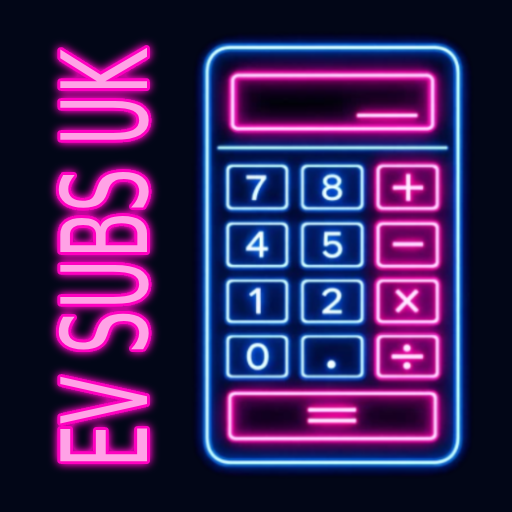
<style>
.page{position:relative;width:512px;height:512px;background:#020617}
.page>*{position:absolute;margin:0}
.t1{font:118.9px "DejaVuSans";color:#ffa2e6;scale:0.59 1}
</style>
<div class="page">
<p class="t1" style="left:58px;top:47px;width:91px;height:415px;rotate:-90deg">EV SUBS UK</p>
</div>
